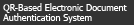
<style>
.page{position:relative;width:134px;height:25px;background:#333333}
.page>*{position:absolute;margin:0}
.t1{font:8.8px "Tahoma";color:#ffffff;scale:1.03 1}
</style>
<div class="page">
<p class="t1" style="left:3px;top:3px;width:124px;height:20px">QR-Based Electronic Document <br>Authentication System</p>
</div>
